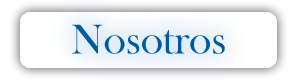
<style>
.page{position:relative;width:300px;height:80px;background:#ffffff}
.page>*{position:absolute;margin:0}
.t1{font:42.9px "BaskOldFace";color:#00589e}
</style>
<div class="page">
<p class="t1" style="left:72px;top:24px;width:153px;height:30px">Nosotros</p>
</div>
